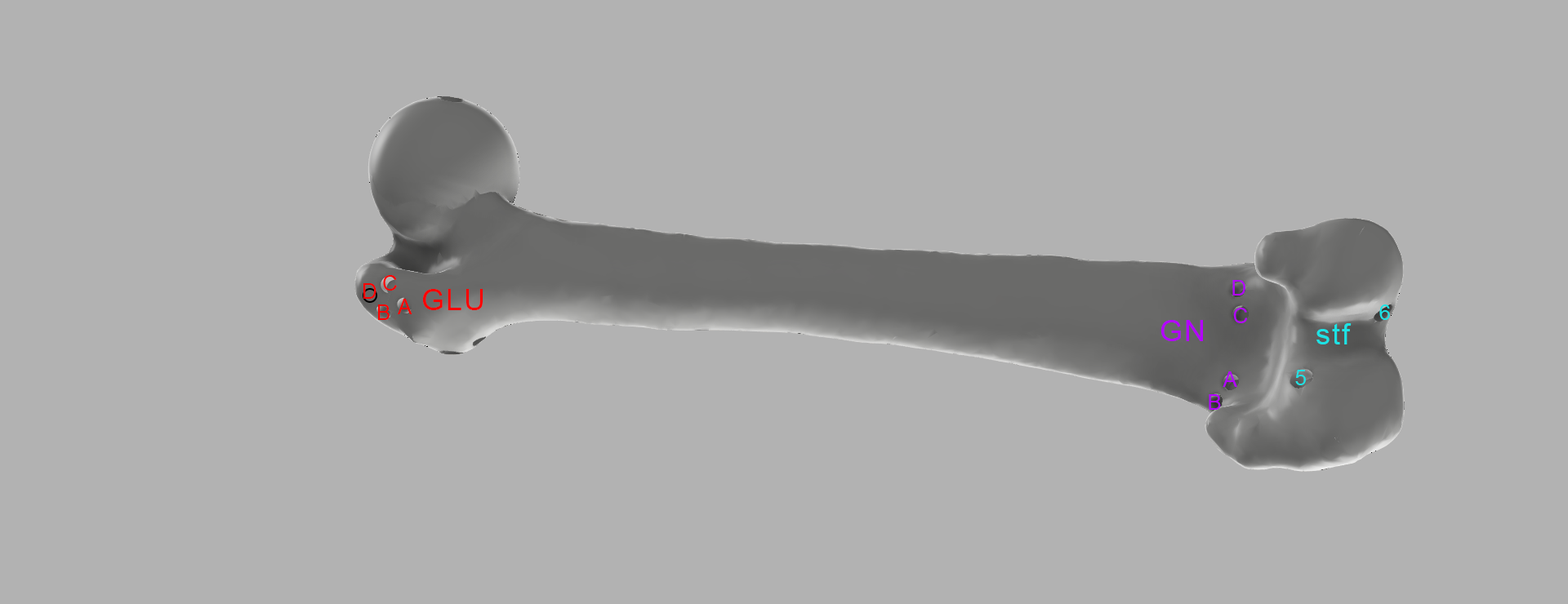
<style>
.page{position:relative;width:1568px;height:604px;background:#b2b2b2}
.page>*{position:absolute;margin:0}
.t1{font:21.2px "ArialMT";letter-spacing:0.06em;color:#b400ff}
.t2{font:21.2px "ArialMT";letter-spacing:0.06em;color:#1ce3e5}
.t3{font:29.4px "ArialMT";letter-spacing:0.06em;color:#b400ff}
.t4{font:29.4px "ArialMT";letter-spacing:0.06em;color:#1ce3e5}
</style>
<div class="page">
<p class="t1" style="left:1232px;top:280px;width:13px;height:16px">D</p>
<p class="t2" style="left:1379px;top:305px;width:11px;height:15px">6</p>
<p class="t1" style="left:1233px;top:308px;width:15px;height:15px">C</p>
<p class="t3" style="left:1160px;top:320px;width:43px;height:21px">GN</p>
<p class="t4" style="left:1316px;top:323px;width:36px;height:22px">stf</p>
<p class="t1" style="left:1223px;top:372px;width:14px;height:15px">A</p>
<p class="t2" style="left:1295px;top:370px;width:11px;height:15px">5</p>
<p class="t1" style="left:1209px;top:394px;width:12px;height:16px">B</p>
</div>
